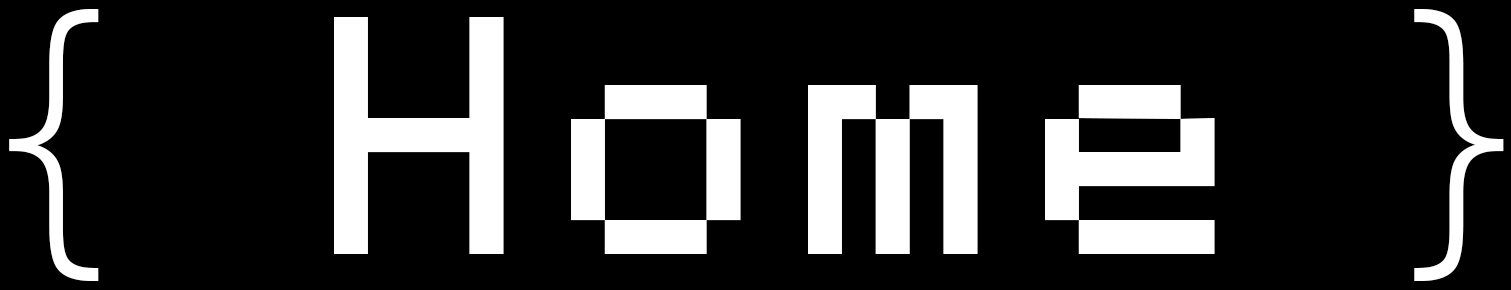
<style>
.page{position:relative;width:1511px;height:290px;background:#000000}
.page>*{position:absolute;margin:0}
.t1{font:270.8px "Susanna";color:#ffffff}
.t2{font:270.8px "Code-7x5";color:#ffffff}
</style>
<div class="page">
<p class="t1" style="left:9px;top:9px;width:90px;height:272px">{</p>
<p class="t2" style="left:334px;top:17px;width:881px;height:237px">Home</p>
<p class="t1" style="left:1414px;top:9px;width:90px;height:272px;rotate:180deg">{</p>
</div>
